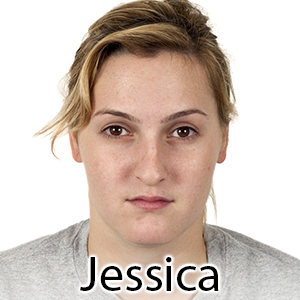
<style>
.page{position:relative;width:300px;height:300px;background:#ffffff}
.page>*{position:absolute;margin:0}
.t1{font:50px "MyriadPro-Regular";color:#000000}
</style>
<div class="page">
<p class="t1" style="left:80px;top:257px;width:139px;height:34px">Jessica</p>
</div>
